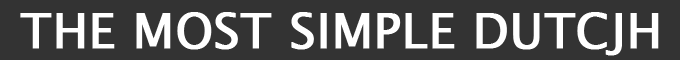
<style>
.page{position:relative;width:680px;height:60px;background:#333333}
.page>*{position:absolute;margin:0}
.t1{font:48px "LucidaSansUnicode";color:#ffffff;font-weight:bold}
</style>
<div class="page">
<p class="t1" style="left:20px;top:12px;width:639px;height:44px">THE MOST SIMPLE DUTCJH</p>
</div>
